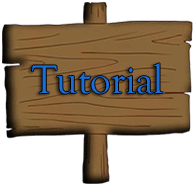
<style>
.page{position:relative;width:196px;height:187px;background:#ffffff}
.page>*{position:absolute;margin:0}
.t1{font:41px "GoudyOldStyleT-Regular";color:#1a6ed8}
</style>
<div class="page">
<p class="t1" style="left:32px;top:63px;width:131px;height:31px">Tutorial</p>
</div>
